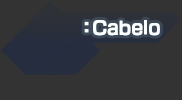
<style>
.page{position:relative;width:182px;height:100px;background:#333333}
.page>*{position:absolute;margin:0}
.t1{font:17.3px "NewRodinPro-B";color:#fafeff;font-weight:bold}
.t2{font:17.3px "NewRodinPro-B";color:#fafeff;font-weight:bold;scale:0.95 1}
</style>
<div class="page">
<p class="t1" style="left:84px;top:21px;width:5px;height:12px">:</p>
<p class="t2" style="left:93px;top:20px;width:67px;height:16px">Cabelo</p>
</div>
